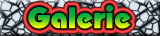
<style>
.page{position:relative;width:160px;height:36px}
.page>*{position:absolute;margin:0}
.t1{font:30px "ITC-BauhausATHeavy"}
</style>
<div class="page">
<p class="t1" style="left:28px;top:5px;width:103px;height:24px">Galerie</p>
</div>
